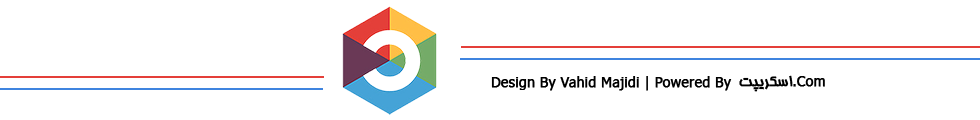
<style>
.page{position:relative;width:980px;height:120px;background:#ffffff}
.page>*{position:absolute;margin:0}
.t1{font:14px "Tahoma";color:#000000;font-weight:bold}
.t2{font:16px "HomaNormal";color:#000000;font-weight:bold}
</style>
<div class="page">
<p class="t1" style="left:491px;top:76px;width:241px;height:15px">Design By Vahid Majidi | Powered By</p>
<p class="t2" style="left:739px;top:75px;width:86px;height:17px"><span class="t1">Com.</span>اسکريپت</p>
</div>
